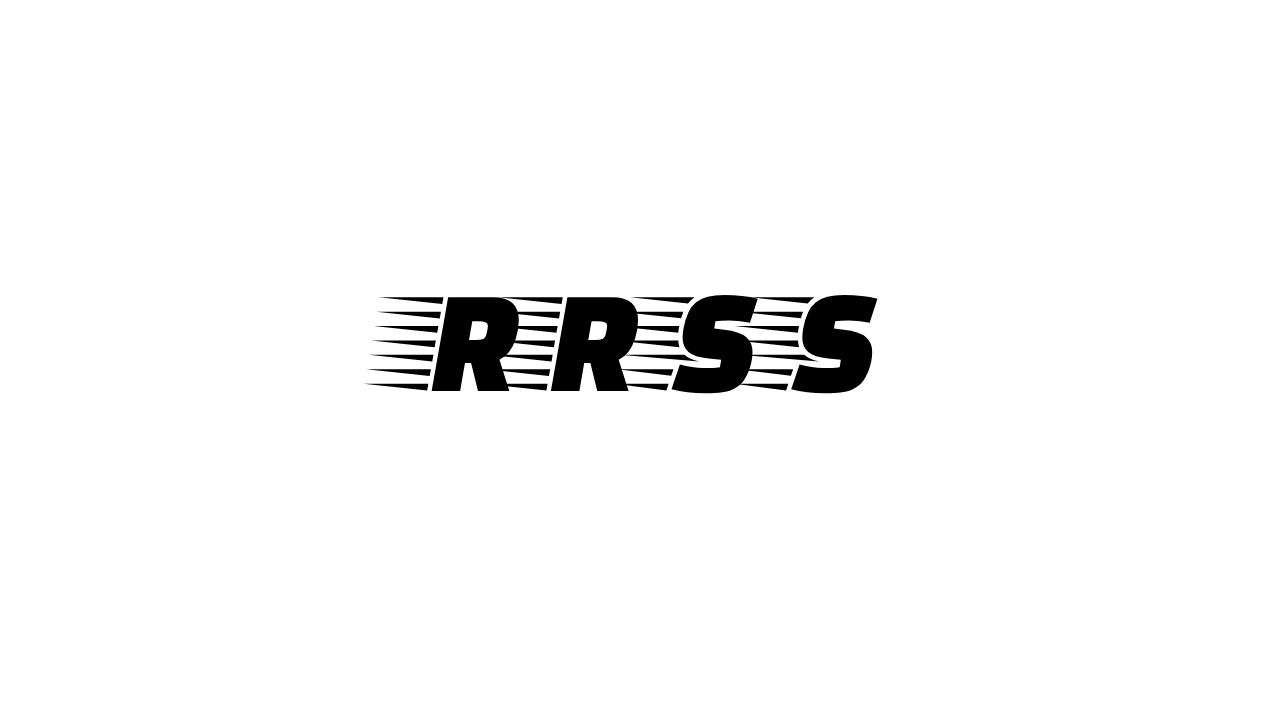
<style>
.page{position:relative;width:1280px;height:720px;background:#ffffff}
.page>*{position:absolute;margin:0}
.t1{font:150px "FasterOne-Regular";color:#000000}
.t2{font:81px "FasterOne-Regular";color:#000000}
</style>
<div class="page">
<p class="t1" style="left:363px;top:295px;width:515px;height:99px"><span class="t2"><br></span>RRSS</p>
</div>
